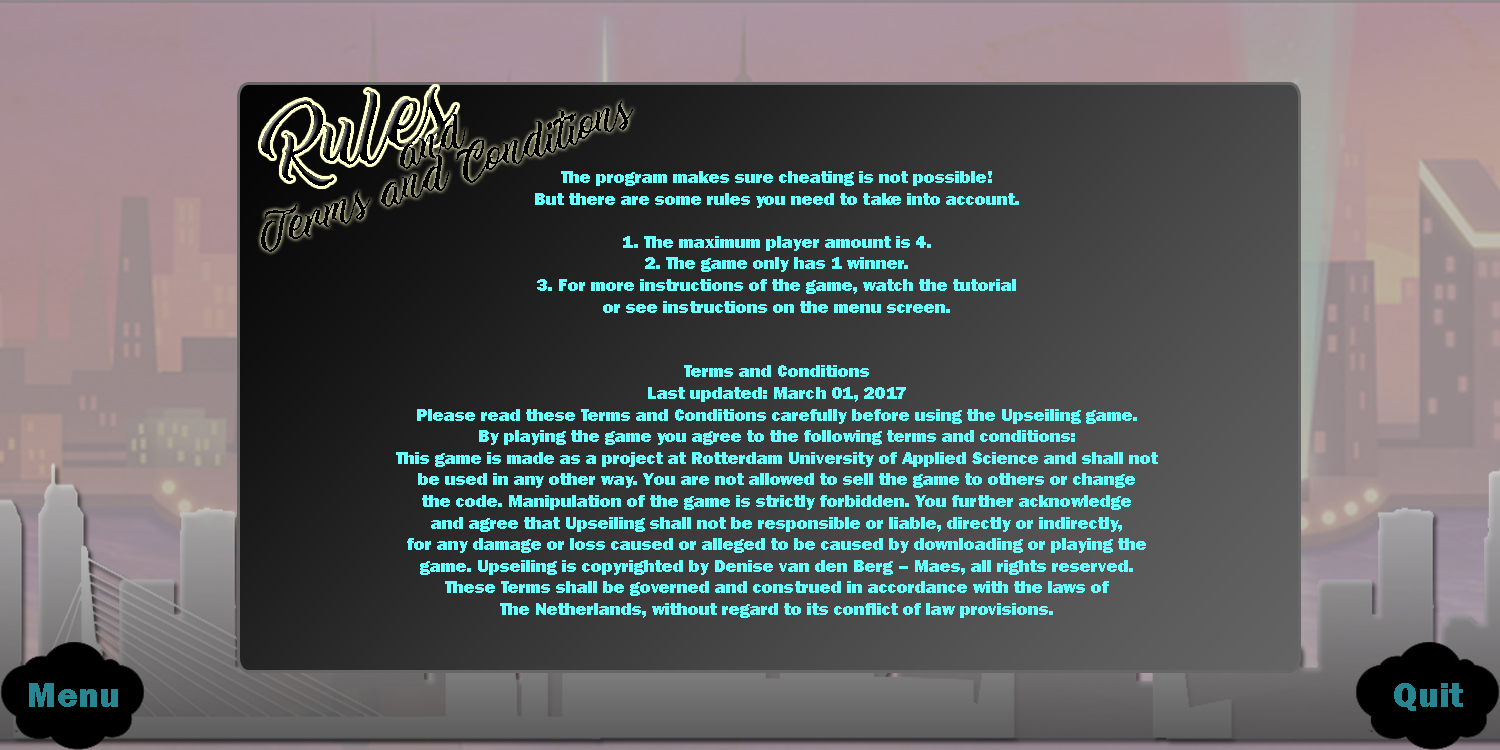
<style>
.page{position:relative;width:1500px;height:750px}
.page>*{position:absolute;margin:0}
.t1{font:36px "WorkInProgress";color:#000000}
.t2{font:18px "FranklinGothic-Heavy";color:#66ffff}
</style>
<div class="page">
<p class="t1" style="left:400px;top:113px;width:66px;height:56px;rotate:-24deg">and</p>
<p class="t2" style="left:396px;top:171px;width:762px;height:447px;text-align:center">The program makes sure cheating is not possible! <br>But there are some rules you need to take into account. <br><br>1. The maximum player amount is 4. <br>2. The game only has 1 winner.<br>3. For more instructions of the game, watch the tutorial <br>or see instructions on the menu screen.<br><br><br>Terms and Conditions <br>Last updated: March 01, 2017  <br>Please read these Terms and Conditions carefully before using the Upseiling game. <br>By playing the game you agree to the following terms and conditions:<br>This game is made as a project at Rotterdam University of Applied Science and shall not be used in any other way. You are not allowed to sell the game to others or change <br>the code. Manipulation of the game is strictly forbidden. You further acknowledge <br>and agree that Upseiling shall not be responsible or liable, directly or indirectly, <br>for any damage or loss caused or alleged to be caused by downloading or playing the game. Upseiling is copyrighted by Denise van den Berg – Maes, all rights reserved.<br>These Terms shall be governed and construed in accordance with the laws of <br>The Netherlands, without regard to its conflict of law provisions.</p>
</div>
